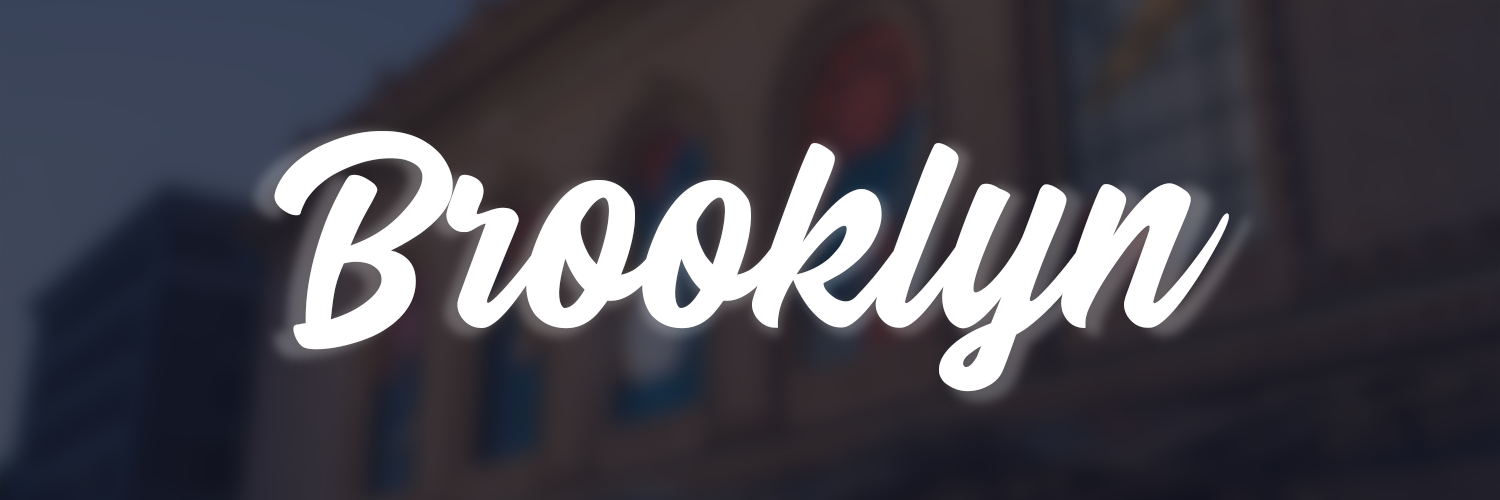
<style>
.page{position:relative;width:1500px;height:500px}
.page>*{position:absolute;margin:0}
.t1{font:300px "CallingHeart";color:#ffffff}
</style>
<div class="page">
<p class="t1" style="left:274px;top:131px;width:955px;height:261px">Brooklyn</p>
</div>
